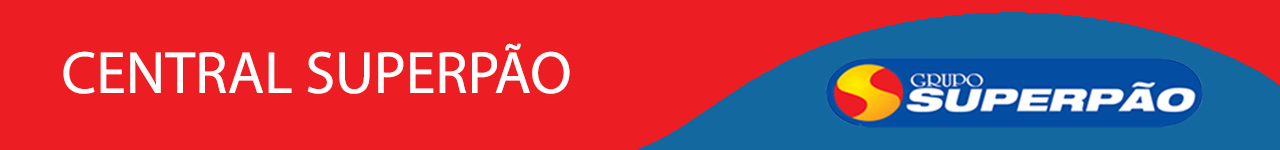
<style>
.page{position:relative;width:1280px;height:150px;background:#ed1d24}
.page>*{position:absolute;margin:0}
.t1{font:60px "MyriadPro-Regular";color:#fefefe}
</style>
<div class="page">
<p class="t1" style="left:63px;top:43px;width:507px;height:51px">CENTRAL SUPERPÃO</p>
</div>
